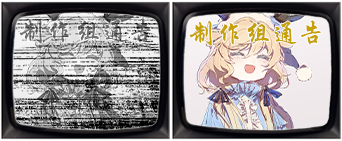
<style>
.page{position:relative;width:342px;height:141px}
.page>*{position:absolute;margin:0}
.t1{font:27.1px "STXingkai";color:#6f6f6f}
.t2{font:27.1px "STXingkai";color:#c5a006}
</style>
<div class="page">
<p class="t1" style="left:19px;top:18px;width:132px;height:26px">制作组通告</p>
<p class="t2" style="left:189px;top:20px;width:132px;height:26px">制作组通告</p>
</div>
